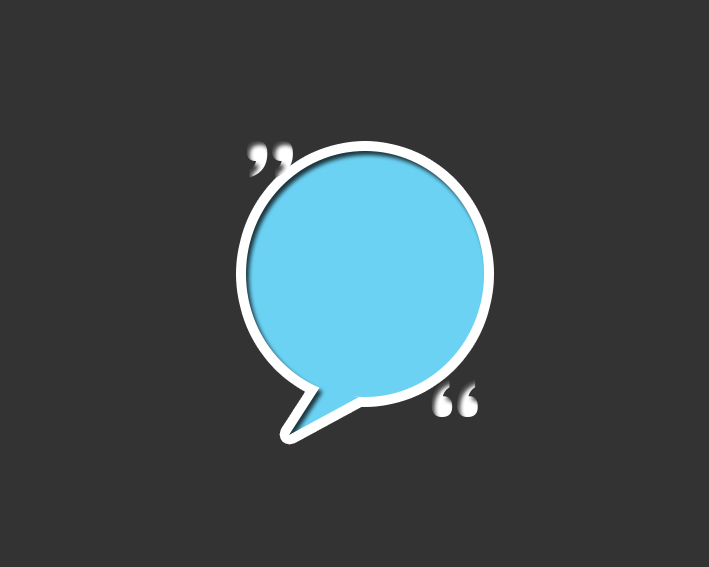
<style>
.page{position:relative;width:709px;height:567px;background:#333333}
.page>*{position:absolute;margin:0}
.t1{font:120px "BritannicBold"}
</style>
<div class="page">
<p class="t1" style="left:246px;top:141px;width:47px;height:37px">„</p>
<p class="t1" style="left:431px;top:379px;width:47px;height:38px">“</p>
</div>
